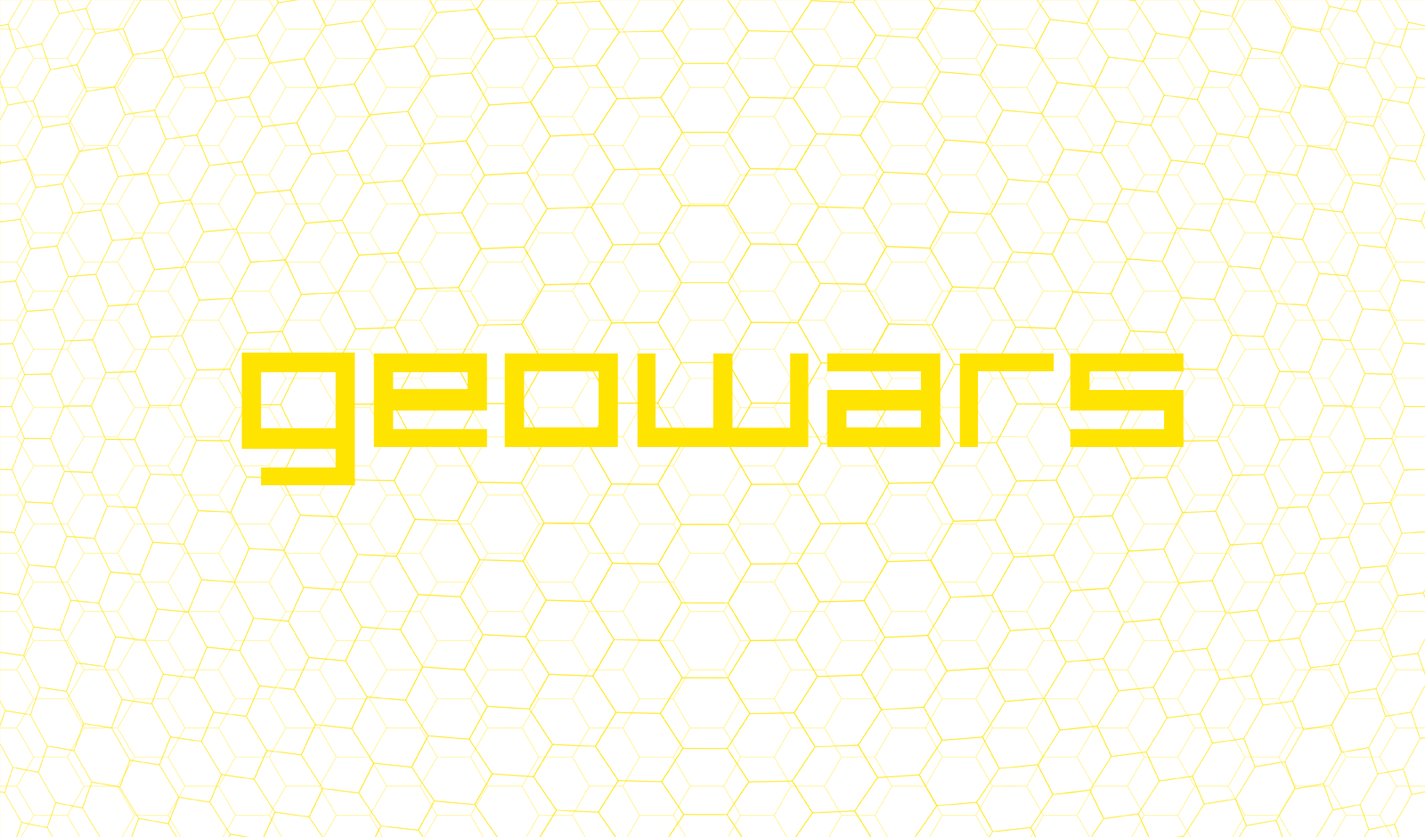
<style>
.page{position:relative;width:1425px;height:837px;background:#ffffff}
.page>*{position:absolute;margin:0}
.t1{font:240.4px "Myiustable";color:#ffe401}
</style>
<div class="page">
<p class="t1" style="left:241px;top:353px;width:942px;height:132px">GEOWARS</p>
</div>
